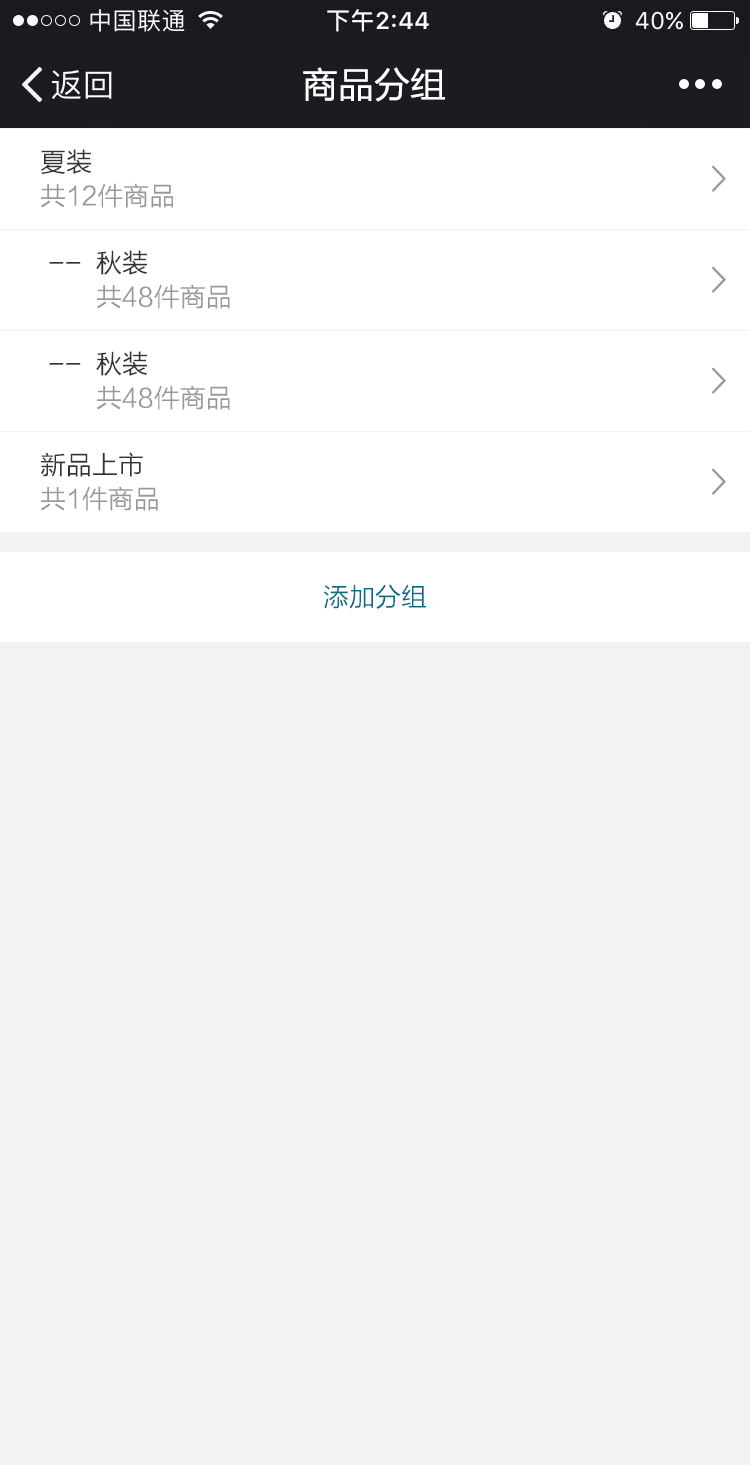
<style>
.page{position:relative;width:750px;height:1465px;background:#f2f2f2}
.page>*{position:absolute;margin:0}
.t1{font:36px "FZLTHK--GBK1-0";color:#ffffff}
.t2{font:26px "FZLTXHK";color:#333333}
.t3{font:26px "FZLTXHK";color:#999999}
.t4{font:26px "FZLTXHK";color:#086a8b}
</style>
<div class="page">
<p class="t1" style="left:303px;top:67px;width:142px;height:35px">商品分组</p>
<p class="t2" style="left:41px;top:149px;width:50px;height:25px">夏装</p>
<p class="t3" style="left:41px;top:183px;width:132px;height:25px">共12件商品</p>
<p class="t2" style="left:96px;top:250px;width:51px;height:25px">秋装</p>
<p class="t2" style="left:49px;top:262px;width:32px;height:2px">--</p>
<p class="t3" style="left:97px;top:284px;width:133px;height:25px">共48件商品</p>
<p class="t2" style="left:96px;top:351px;width:51px;height:25px">秋装</p>
<p class="t2" style="left:49px;top:363px;width:32px;height:2px">--</p>
<p class="t3" style="left:97px;top:385px;width:133px;height:25px">共48件商品</p>
<p class="t2" style="left:41px;top:452px;width:102px;height:25px">新品上市</p>
<p class="t3" style="left:41px;top:486px;width:117px;height:25px">共1件商品</p>
<p class="t4" style="left:324px;top:584px;width:102px;height:25px">添加分组</p>
</div>
